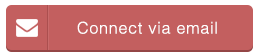
<style>
.page{position:relative;width:259px;height:55px;background:#c35f5f}
.page>*{position:absolute;margin:0}
.t1{font:16px "Helvetica-Light";letter-spacing:0.05em;color:#ffffff}
</style>
<div class="page">
<p class="t1" style="left:77px;top:21px;width:140px;height:13px">Connect via email</p>
</div>
